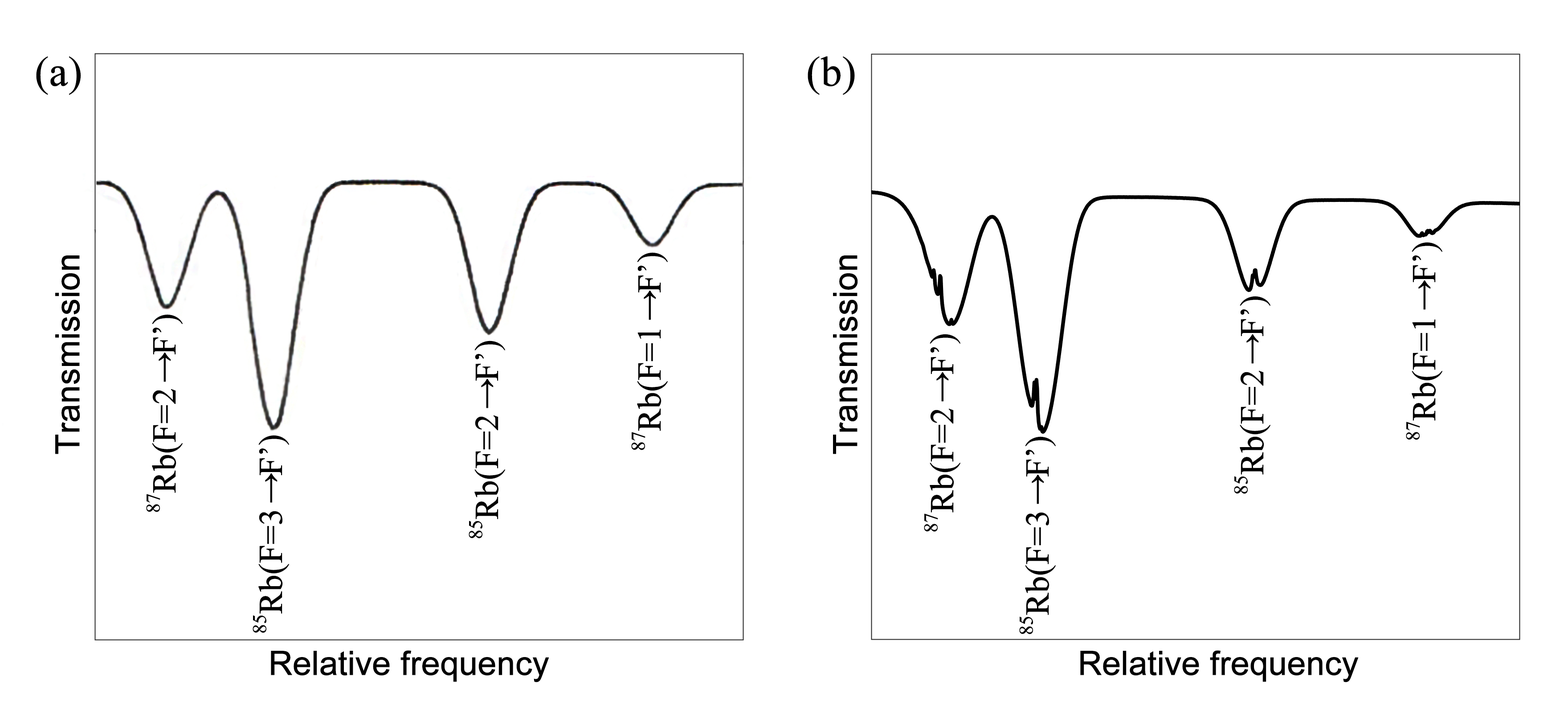
<style>
.page{position:relative;width:1568px;height:719px;background:#ffffff}
.page>*{position:absolute;margin:0}
.t1{font:42px "TimesNewRomanPSMT";letter-spacing:-0.02em;color:#000000;font-weight:bold}
.t2{font:33.4px "TimesNewRomanPSMT";letter-spacing:-0.02em;color:#000000;font-weight:bold}
.t3{font:33.4px "ArialMT";letter-spacing:-0.02em;color:#000000;font-weight:bold}
</style>
<div class="page">
<p class="t1" style="left:36px;top:56px;width:45px;height:39px">(a)</p>
<p class="t1" style="left:808px;top:56px;width:47px;height:39px">(b)</p>
<p class="t2" style="left:1406px;top:242px;width:37px;height:198px;rotate:180deg">87Rb(F=1↓F’)</p>
<p class="t3" style="left:55px;top:255px;width:25px;height:199px;rotate:-90deg">Transmission</p>
<p class="t2" style="left:631px;top:252px;width:37px;height:198px;rotate:180deg">87Rb(F=1↓F’)</p>
<p class="t3" style="left:833px;top:255px;width:25px;height:199px;rotate:-90deg">Transmission</p>
<p class="t2" style="left:1234px;top:296px;width:37px;height:198px;rotate:180deg">85Rb(F=2↓F’)</p>
<p class="t2" style="left:146px;top:314px;width:37px;height:198px;rotate:180deg">87Rb(F=2↓F’)</p>
<p class="t2" style="left:469px;top:340px;width:37px;height:198px;rotate:180deg">85Rb(F=2↓F’)</p>
<p class="t2" style="left:924px;top:334px;width:37px;height:197px;rotate:180deg">87Rb(F=2↓F’)</p>
<p class="t2" style="left:253px;top:435px;width:37px;height:198px;rotate:180deg">85Rb(F=3↓F’)</p>
<p class="t2" style="left:1019px;top:436px;width:37px;height:198px;rotate:180deg">85Rb(F=3↓F’)</p>
<p class="t3" style="left:271px;top:650px;width:278px;height:32px">Relative frequency</p>
<p class="t3" style="left:1080px;top:650px;width:279px;height:32px">Relative frequency</p>
</div>
